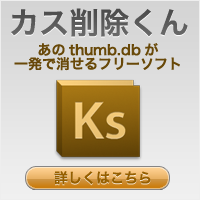
<style>
.page{position:relative;width:200px;height:200px}
.page>*{position:absolute;margin:0}
.t1{font:30px "HiraKakuPro-W6";color:#5b5b5b}
.t2{font:14px/14px "HiraKakuStdN-W6";color:#684808}
.t3{font:14px "HiraKakuStdN-W6";color:#966001}
</style>
<div class="page">
<p class="t1" style="left:11px;top:8px;width:177px;height:29px">カス削除くん</p>
<p class="t2" style="left:14px;top:43px;width:166px;height:28px;text-align:center">あのthumb.dbが<br>一発で消せるフリーソフト</p>
<p class="t3" style="left:54px;top:171px;width:97px;height:14px">詳しくはこちら</p>
</div>
